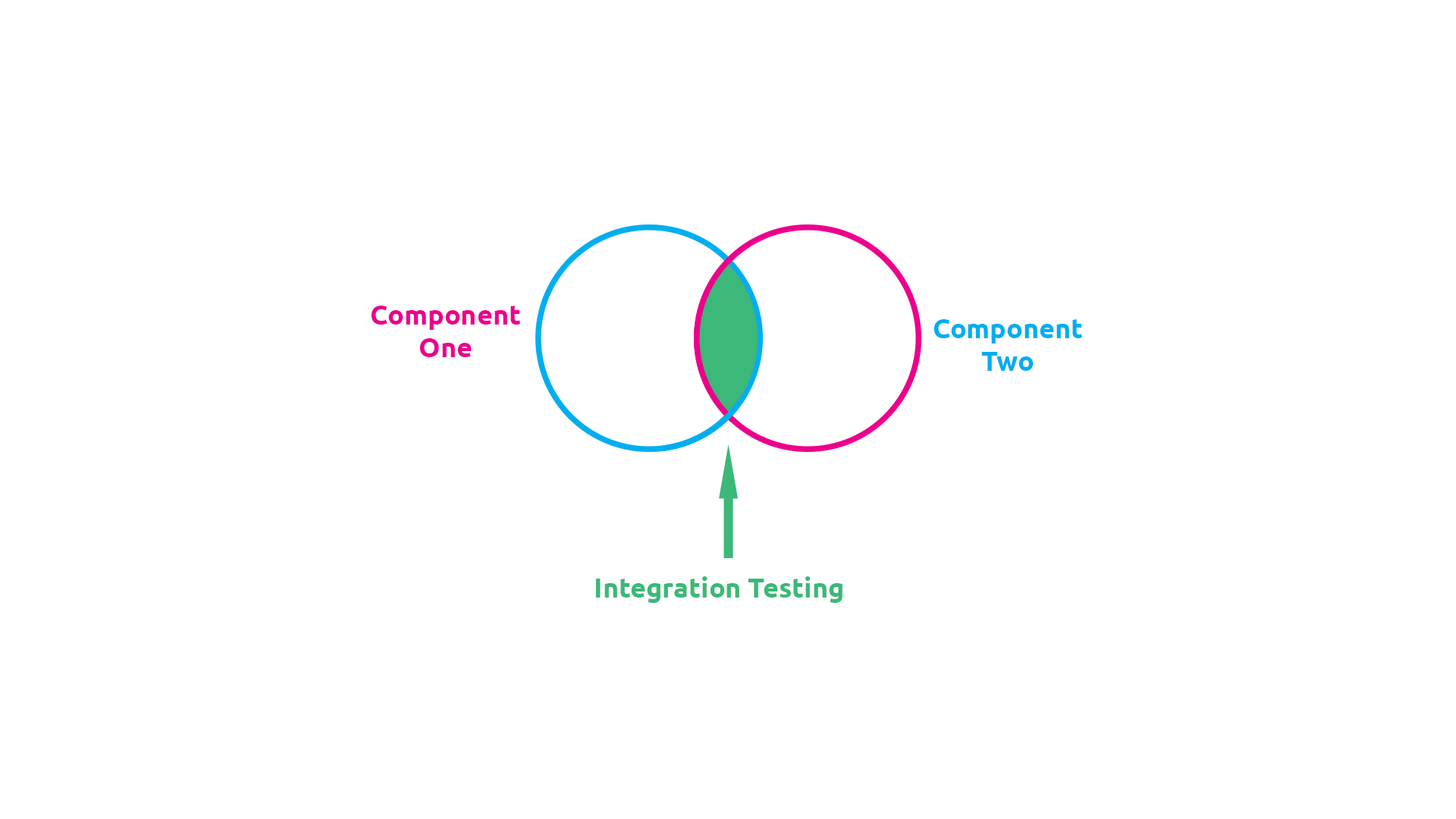
<style>
.page{position:relative;width:1456px;height:819px;background:#ffffff}
.page>*{position:absolute;margin:0}
.t1{font:27.3px "Ubuntu-Bold";color:#ec008c}
.t2{font:27.3px "Ubuntu-Bold";color:#00aeef}
.t3{font:27.3px "Ubuntu-Bold";color:#3cb878}
</style>
<div class="page">
<p class="t1" style="left:371px;top:306px;width:149px;height:51px;text-align:center">Component<br>One</p>
<p class="t2" style="left:933px;top:319px;width:149px;height:52px;text-align:center">Component<br>Two</p>
<p class="t3" style="left:595px;top:576px;width:247px;height:27px">Integration Testing</p>
</div>
